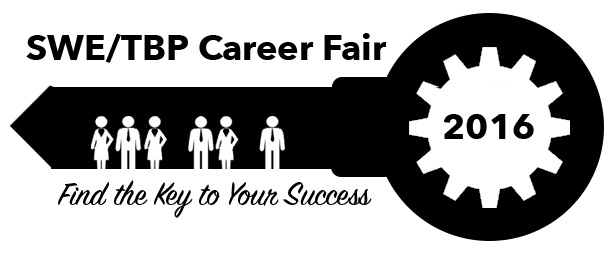
<style>
.page{position:relative;width:615px;height:253px;background:#ffffff}
.page>*{position:absolute;margin:0}
.t1{font:36px "AvenirNext-Bold";color:#000000}
.t2{font:36px "SignPainter-HouseScript";color:#000000}
</style>
<div class="page">
<p class="t1" style="left:26px;top:33px;width:361px;height:30px">SWE/TBP Career Fair</p>
<p class="t1" style="left:443px;top:114px;width:91px;height:25px">2016</p>
<p class="t2" style="left:58px;top:180px;width:314px;height:38px">Find the Key to Your Success</p>
</div>
